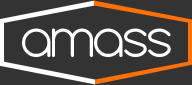
<style>
.page{position:relative;width:192px;height:85px;background:#333333}
.page>*{position:absolute;margin:0}
.t1{font:52px "Comfortaa-Light";letter-spacing:-0.05em;color:#ffffff}
</style>
<div class="page">
<p class="t1" style="left:22px;top:28px;width:149px;height:29px">amass</p>
</div>
